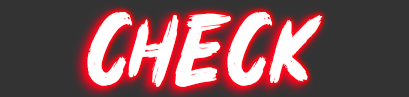
<style>
.page{position:relative;width:409px;height:97px;background:#333333}
.page>*{position:absolute;margin:0}
.t1{font:103.4px "Dirty-Brush";color:#ffffff}
</style>
<div class="page">
<p class="t1" style="left:87px;top:11px;width:236px;height:76px">CHECK</p>
</div>
